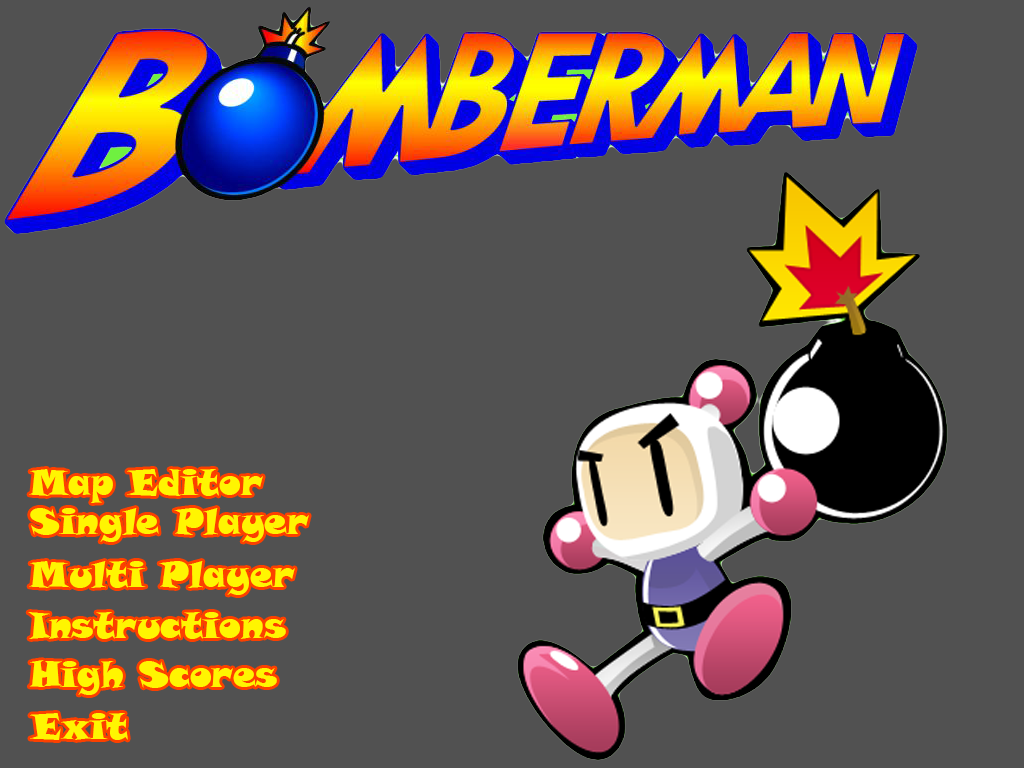
<style>
.page{position:relative;width:1024px;height:768px;background:#515151}
.page>*{position:absolute;margin:0}
.t1{font:36px "SnapITC-Regular";color:#fff501}
</style>
<div class="page">
<p class="t1" style="left:29px;top:469px;width:234px;height:34px">Map Editor</p>
<p class="t1" style="left:30px;top:508px;width:279px;height:34px">Single Player</p>
<p class="t1" style="left:29px;top:561px;width:266px;height:34px">Multi Player</p>
<p class="t1" style="left:28px;top:612px;width:258px;height:27px">Instructions</p>
<p class="t1" style="left:29px;top:660px;width:248px;height:35px">High Scores</p>
<p class="t1" style="left:30px;top:713px;width:98px;height:27px">Exit</p>
</div>
